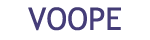
<style>
.page{position:relative;width:150px;height:40px;background:#ffffff}
.page>*{position:absolute;margin:0}
.t1{font:31px "TrebuchetMS";color:#4c4385}
</style>
<div class="page">
<p class="t1" style="left:28px;top:7px;width:93px;height:24px">VOOPE</p>
</div>
